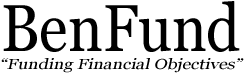
<style>
.page{position:relative;width:244px;height:76px;background:#ffffff}
.page>*{position:absolute;margin:0}
.t1{font:14.6px/18px "Georgia";color:#000000;font-style:italic;scale:1.21 1}
.t2{font:66px/36px "Georgia";color:#000000;scale:0.89 1}
</style>
<div class="page">
<p class="t1" style="left:1px;top:1px;width:243px;height:72px;text-align:center"><span class="t2">BenFund<br></span>“Funding Financial Objectives”</p>
</div>
